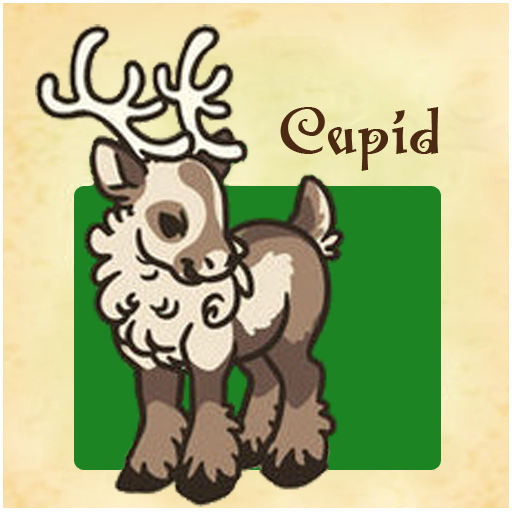
<style>
.page{position:relative;width:512px;height:512px}
.page>*{position:absolute;margin:0}
.t1{font:66.7px "SantasBigSecretBB";color:#4c2913}
</style>
<div class="page">
<p class="t1" style="left:280px;top:107px;width:159px;height:64px">Cupid</p>
</div>
